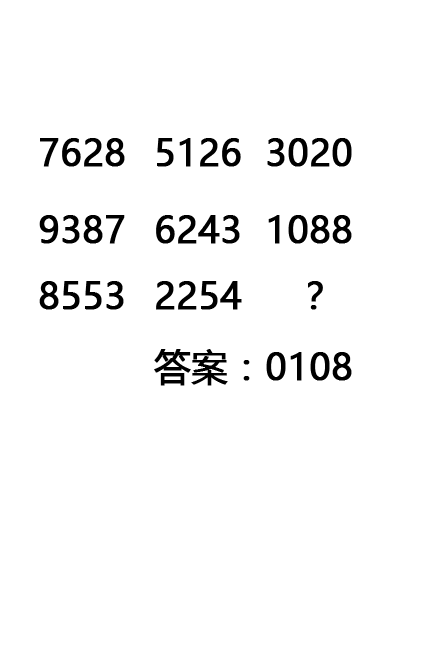
<style>
.page{position:relative;width:447px;height:665px;background:#ffffff}
.page>*{position:absolute;margin:0}
.t1{font:36px "MicrosoftYaHei";color:#000000;font-weight:bold}
</style>
<div class="page">
<p class="t1" style="left:40px;top:138px;width:85px;height:29px">7628</p>
<p class="t1" style="left:157px;top:138px;width:84px;height:29px">5126</p>
<p class="t1" style="left:267px;top:138px;width:85px;height:29px">3020</p>
<p class="t1" style="left:39px;top:215px;width:86px;height:29px">9387</p>
<p class="t1" style="left:156px;top:215px;width:84px;height:29px">6243</p>
<p class="t1" style="left:268px;top:215px;width:84px;height:29px">1088</p>
<p class="t1" style="left:39px;top:281px;width:85px;height:29px">8553</p>
<p class="t1" style="left:156px;top:281px;width:86px;height:29px">2254</p>
<p class="t1" style="left:308px;top:281px;width:15px;height:29px">？</p>
<p class="t1" style="left:154px;top:349px;width:198px;height:37px">答案：0108</p>
</div>
